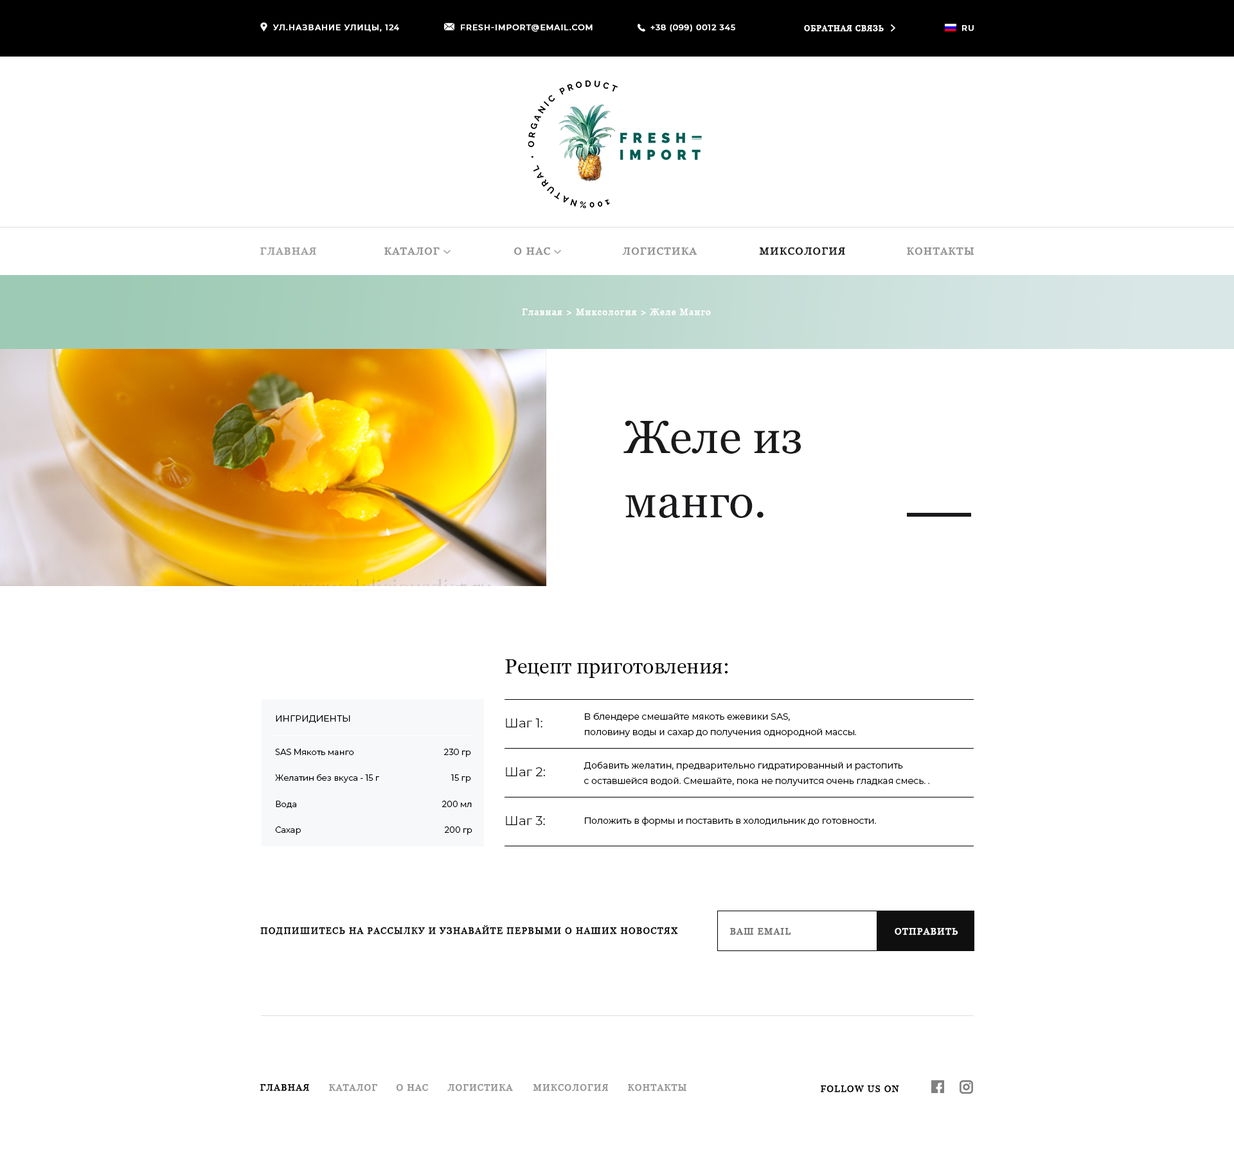
<style>
.page{position:relative;width:1234px;height:1158px;background:#ffffff}
.page>*{position:absolute;margin:0}
.t1{font:7.7px "Montserrat-Medium";letter-spacing:0.075em;color:#ffffff;text-transform:uppercase;font-weight:bold}
.t2{font:7.7px "Montserrat-Medium";letter-spacing:0.075em;color:#ffffff;font-weight:bold}
.t3{font:7.7px "Georgia";letter-spacing:0.075em;color:#ffffff;text-transform:uppercase;font-weight:bold}
.t4{font:10.3px "Georgia";letter-spacing:0.075em;color:#a0a0a0;text-transform:uppercase;font-weight:bold}
.t5{font:10.3px "Georgia";letter-spacing:0.075em;color:#929292;text-transform:uppercase;font-weight:bold}
.t6{font:10.3px "Georgia";letter-spacing:0.075em;color:#1a1a1d;text-transform:uppercase;font-weight:bold}
.t7{font:9px "Georgia";letter-spacing:0.075em;color:#ffffff;font-weight:bold}
.t8{font:46.3px/64.3px "Georgia";color:#1a1a1d}
.t9{font:20.6px "Georgia";color:#000000}
.t10{font:9px/15.4px "Montserrat-Regular";color:#000000}
.t11{font:9px "Montserrat-Regular";color:#000000;text-transform:uppercase}
.t12{font:12.9px "Montserrat-Regular";color:#000000}
.t13{font:8.4px "Montserrat-Regular";color:#000000}
.t14{font:8.4px "Montserrat-Regular";color:#010101}
.t15{font:9px "Montserrat-Regular";color:#000000}
.t16{font:9px "Georgia";letter-spacing:0.075em;color:#000000;text-transform:uppercase;font-weight:bold}
.t17{font:9px "Georgia";letter-spacing:0.075em;color:#6e6e6e;text-transform:uppercase;font-weight:bold}
.t18{font:9px "Georgia";letter-spacing:0.075em;color:#ffffff;text-transform:uppercase;font-weight:bold}
.t19{font:9px "Georgia";letter-spacing:0.075em;color:#929292;text-transform:uppercase;font-weight:bold}
</style>
<div class="page">
<p class="t1" style="left:273px;top:24px;width:126px;height:8px"><span class="t2">УЛ.</span>название улицы<span class="t2">, 124</span></p>
<p class="t1" style="left:461px;top:24px;width:132px;height:8px">FRESH-IMPORT@EMAIL.COM</p>
<p class="t2" style="left:651px;top:24px;width:84px;height:8px">+38 (099) 0012 345</p>
<p class="t3" style="left:804px;top:25px;width:80px;height:7px">обратная связь</p>
<p class="t1" style="left:962px;top:25px;width:12px;height:7px">Ru</p>
<p class="t4" style="left:260px;top:248px;width:56px;height:7px">гЛАВНАЯ</p>
<p class="t5" style="left:384px;top:248px;width:56px;height:7px">КАТАЛОГ</p>
<p class="t5" style="left:514px;top:248px;width:37px;height:7px">О НАС</p>
<p class="t5" style="left:622px;top:248px;width:76px;height:7px">логистика</p>
<p class="t6" style="left:759px;top:248px;width:86px;height:7px">миксология</p>
<p class="t5" style="left:907px;top:248px;width:68px;height:7px">контакты</p>
<p class="t7" style="left:522px;top:309px;width:189px;height:7px">Главная &gt; Миксология &gt; Желе Манго</p>
<p class="t8" style="left:624px;top:420px;width:177px;height:98px">Желе из<br>манго.</p>
<p class="t9" style="left:505px;top:660px;width:223px;height:18px">Рецепт приготовления:</p>
<p class="t10" style="left:585px;top:713px;width:271px;height:24px">В блендере смешайте мякоть ежевики SAS, <br>половину воды и сахар до получения однородной массы.</p>
<p class="t11" style="left:276px;top:716px;width:74px;height:8px">Ингридиенты</p>
<p class="t12" style="left:506px;top:719px;width:37px;height:9px">Шаг 1:</p>
<p class="t13" style="left:275px;top:749px;width:79px;height:6px">SAS Мякоть манго</p>
<p class="t14" style="left:444px;top:749px;width:27px;height:8px">230 гр</p>
<p class="t10" style="left:584px;top:762px;width:346px;height:24px">Добавить желатин, предварительно гидратированный и растопить <br>с оставшейся водой. Смешайте, пока не получится очень гладкая смесь. .</p>
<p class="t12" style="left:506px;top:768px;width:39px;height:9px">Шаг 2:</p>
<p class="t13" style="left:275px;top:774px;width:105px;height:9px">Желатин без вкуса - 15 г</p>
<p class="t13" style="left:451px;top:775px;width:20px;height:8px">15 гр</p>
<p class="t13" style="left:276px;top:801px;width:20px;height:8px">Вода</p>
<p class="t13" style="left:442px;top:801px;width:30px;height:6px">200 мл</p>
<p class="t12" style="left:506px;top:816px;width:39px;height:9px">Шаг 3:</p>
<p class="t15" style="left:585px;top:817px;width:291px;height:9px">Положить в формы и поставить в холодильник до готовности.</p>
<p class="t13" style="left:275px;top:827px;width:26px;height:8px">Сахар</p>
<p class="t13" style="left:445px;top:827px;width:28px;height:8px">200 гр</p>
<p class="t16" style="left:260px;top:926px;width:418px;height:10px">ПОДПИШИТЕСЬ НА РАССЫЛКУ И УЗНАВАЙТЕ ПЕРВЫМИ О НАШИХ НОВОСТЯХ</p>
<p class="t17" style="left:730px;top:928px;width:61px;height:7px">ВАШ email</p>
<p class="t18" style="left:895px;top:928px;width:64px;height:7px">ОТПРАВИТЬ</p>
<p class="t16" style="left:260px;top:1084px;width:49px;height:8px">гЛАВНАЯ</p>
<p class="t19" style="left:329px;top:1084px;width:48px;height:8px">КАТАЛОГ</p>
<p class="t19" style="left:396px;top:1084px;width:33px;height:8px">О НАС</p>
<p class="t19" style="left:447px;top:1084px;width:66px;height:8px">логистика</p>
<p class="t19" style="left:533px;top:1084px;width:76px;height:8px">миксология</p>
<p class="t19" style="left:628px;top:1084px;width:59px;height:8px">контакты</p>
<p class="t16" style="left:821px;top:1086px;width:78px;height:7px">follow us on</p>
</div>
